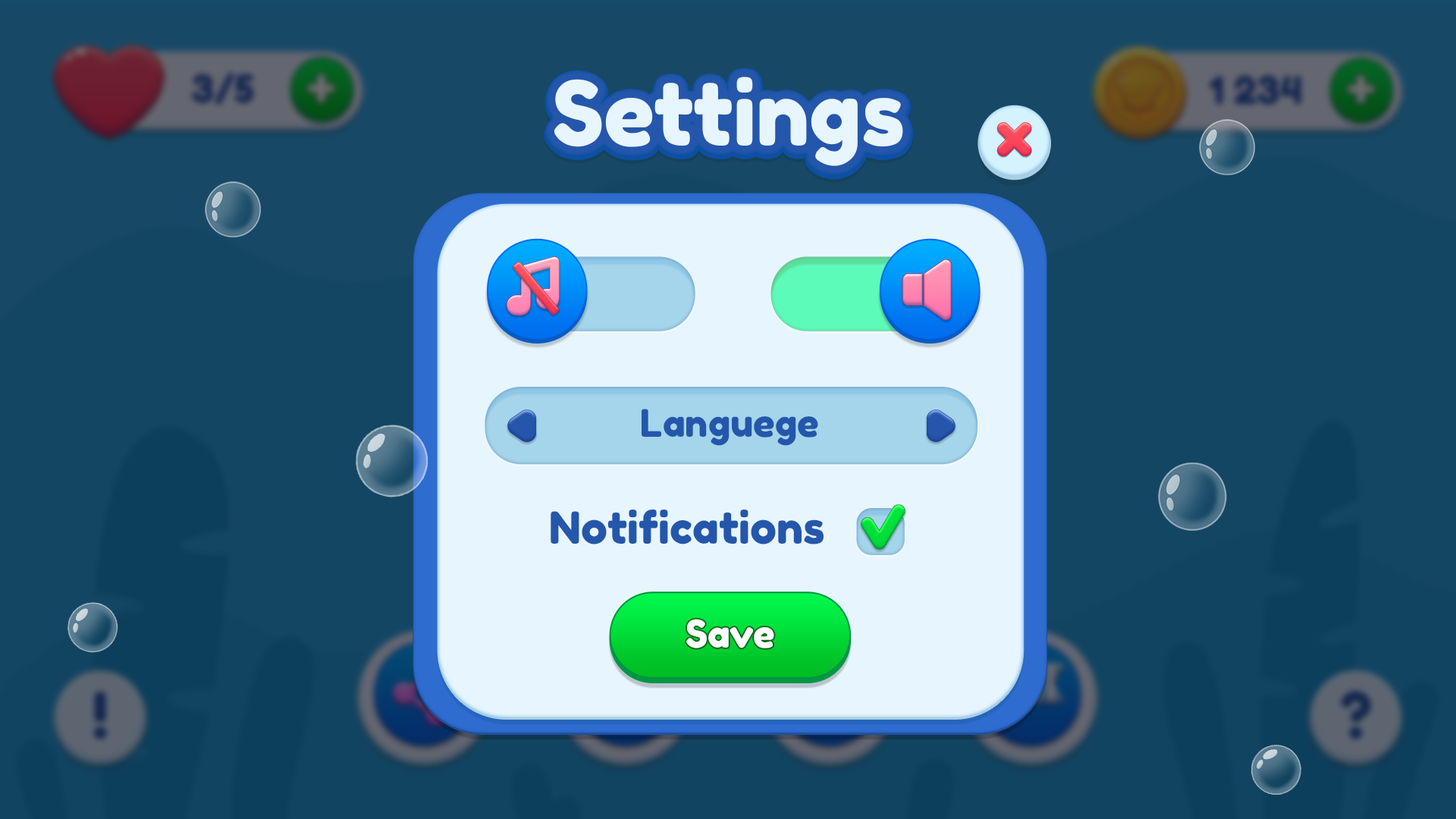
<style>
.page{position:relative;width:1456px;height:819px;background:#134663}
.page>*{position:absolute;margin:0}
.t1{font:88.5px "FredokaOne-Regular";color:#ffffff}
.t2{font:37.9px "FredokaOne-Regular";color:#2457ab}
.t3{font:44.2px "FredokaOne-Regular";color:#2457ab}
.t4{font:37.9px "FredokaOne-Regular";color:#ffffff}
</style>
<div class="page">
<p class="t1" style="left:554px;top:77px;width:349px;height:89px">Settings</p>
<p class="t2" style="left:642px;top:409px;width:176px;height:37px">Languege</p>
<p class="t3" style="left:551px;top:509px;width:273px;height:35px">Notifications</p>
<p class="t4" style="left:686px;top:619px;width:88px;height:29px">Save</p>
</div>
